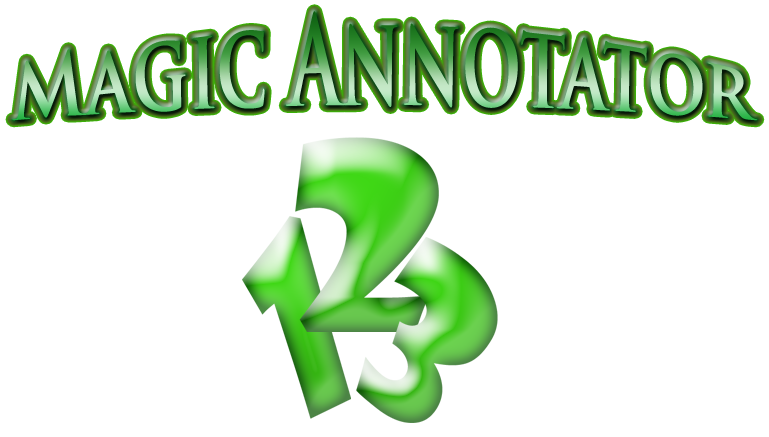
<style>
.page{position:relative;width:769px;height:437px;background:#ffffff}
.page>*{position:absolute;margin:0}
.t1{font:72px "TrajanPro-Bold";color:#000000}
</style>
<div class="page">
<p class="t1" style="left:12px;top:11px;width:746px;height:110px">Magic Annotator</p>
</div>
